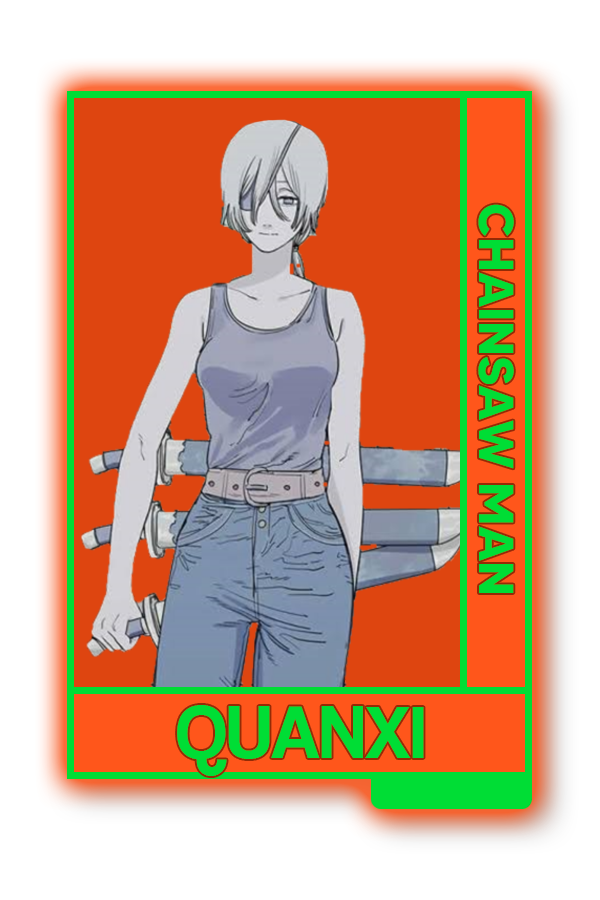
<style>
.page{position:relative;width:600px;height:900px;background:#ffffff}
.page>*{position:absolute;margin:0}
.t1{font:48.8px "MADETOMMY-Bold";color:#00dd35}
.t2{font:75.7px "CoolveticaRg-Regular";color:#00dd35}
</style>
<div class="page">
<p class="t1" style="left:478px;top:204px;width:36px;height:389px;rotate:90deg">CHAINSAW MAN</p>
<p class="t2" style="left:177px;top:705px;width:247px;height:71px">QUANXI</p>
</div>
